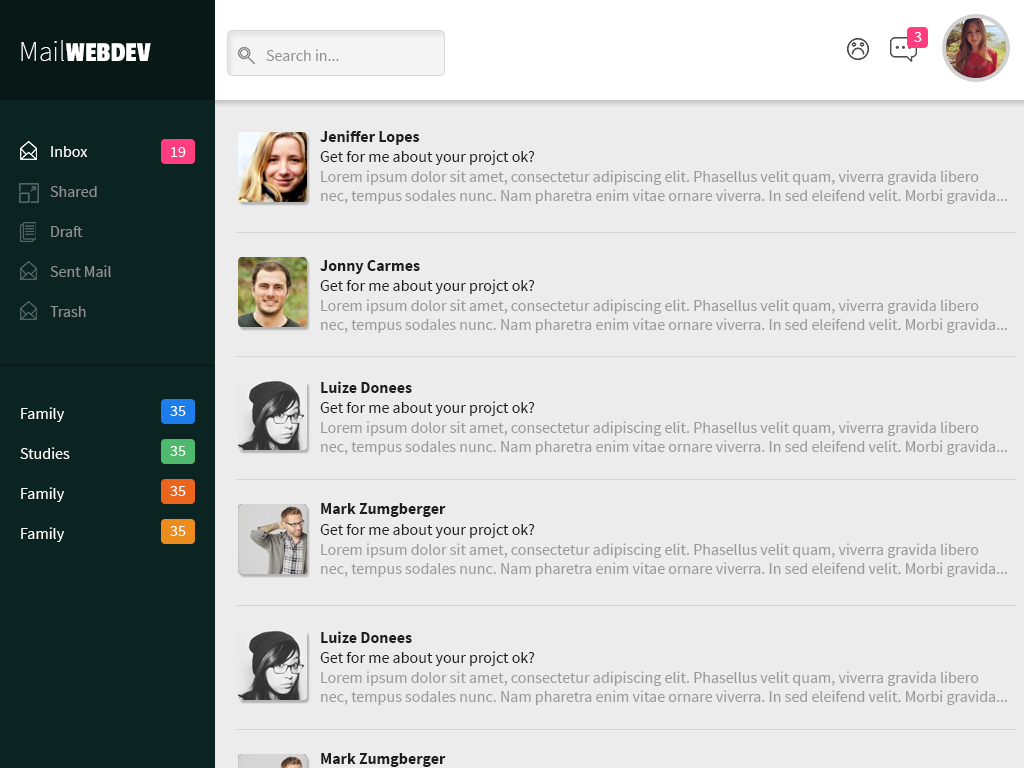
<style>
.page{position:relative;width:1024px;height:768px;background:#ececec}
.page>*{position:absolute;margin:0}
.t1{font:28.6px "PassionOne-Regular";color:#ffffff}
.t2{font:28.6px "SourceSansPro-ExtraLight";color:#ffffff}
.t3{font:16px "SourceSansPro-Regular";color:#ffffff}
.t4{font:16px "SourceSansPro-Regular";color:#919191}
.t5{font:16px "SourceSansPro-Bold";color:#1f1e1e}
.t6{font:16px "SourceSansPro-Regular";color:#1f1e1e}
.t7{font:16px "SourceSansPro-Regular";color:#9a9999}
.t8{font:16px "SourceSansPro-Regular";color:#8d9291}
</style>
<div class="page">
<p class="t1" style="left:21px;top:40px;width:130px;height:21px"><span class="t2">Mail</span>WEBDEV</p>
<p class="t3" style="left:914px;top:32px;width:8px;height:10px">3</p>
<p class="t4" style="left:266px;top:49px;width:73px;height:12px">Search in...</p>
<p class="t5" style="left:320px;top:130px;width:100px;height:15px">Jeniffer Lopes</p>
<p class="t3" style="left:51px;top:146px;width:37px;height:11px">Inbox</p>
<p class="t3" style="left:171px;top:147px;width:15px;height:10px">19</p>
<p class="t6" style="left:320px;top:150px;width:215px;height:15px">Get for me about your projct ok?</p>
<p class="t7" style="left:321px;top:170px;width:686px;height:34px">Lorem ipsum dolor sit amet, consectetur adipiscing elit. Phasellus velit quam, viverra gravida libero <br>nec, tempus sodales nunc. Nam pharetra enim vitae ornare viverra. In sed eleifend velit. Morbi gravida...</p>
<p class="t8" style="left:50px;top:186px;width:47px;height:11px">Shared</p>
<p class="t8" style="left:51px;top:226px;width:32px;height:11px">Draft</p>
<p class="t8" style="left:50px;top:265px;width:61px;height:12px">Sent Mail</p>
<p class="t5" style="left:320px;top:260px;width:100px;height:14px">Jonny Carmes</p>
<p class="t6" style="left:320px;top:279px;width:215px;height:15px">Get for me about your projct ok?</p>
<p class="t7" style="left:321px;top:299px;width:686px;height:34px">Lorem ipsum dolor sit amet, consectetur adipiscing elit. Phasellus velit quam, viverra gravida libero <br>nec, tempus sodales nunc. Nam pharetra enim vitae ornare viverra. In sed eleifend velit. Morbi gravida...</p>
<p class="t8" style="left:50px;top:306px;width:36px;height:11px">Trash</p>
<p class="t5" style="left:321px;top:381px;width:91px;height:12px">Luize Donees</p>
<p class="t6" style="left:320px;top:401px;width:215px;height:15px">Get for me about your projct ok?</p>
<p class="t3" style="left:21px;top:407px;width:43px;height:15px">Family</p>
<p class="t3" style="left:170px;top:406px;width:16px;height:10px">35</p>
<p class="t7" style="left:321px;top:421px;width:686px;height:34px">Lorem ipsum dolor sit amet, consectetur adipiscing elit. Phasellus velit quam, viverra gravida libero <br>nec, tempus sodales nunc. Nam pharetra enim vitae ornare viverra. In sed eleifend velit. Morbi gravida...</p>
<p class="t3" style="left:20px;top:447px;width:50px;height:12px">Studies</p>
<p class="t3" style="left:170px;top:446px;width:16px;height:10px">35</p>
<p class="t3" style="left:170px;top:486px;width:16px;height:10px">35</p>
<p class="t3" style="left:21px;top:487px;width:43px;height:15px">Family</p>
<p class="t5" style="left:321px;top:503px;width:125px;height:14px">Mark Zumgberger</p>
<p class="t3" style="left:21px;top:527px;width:43px;height:15px">Family</p>
<p class="t3" style="left:170px;top:526px;width:16px;height:10px">35</p>
<p class="t6" style="left:320px;top:523px;width:215px;height:15px">Get for me about your projct ok?</p>
<p class="t7" style="left:321px;top:543px;width:686px;height:34px">Lorem ipsum dolor sit amet, consectetur adipiscing elit. Phasellus velit quam, viverra gravida libero <br>nec, tempus sodales nunc. Nam pharetra enim vitae ornare viverra. In sed eleifend velit. Morbi gravida...</p>
<p class="t5" style="left:321px;top:631px;width:91px;height:12px">Luize Donees</p>
<p class="t6" style="left:320px;top:651px;width:215px;height:15px">Get for me about your projct ok?</p>
<p class="t7" style="left:321px;top:671px;width:686px;height:34px">Lorem ipsum dolor sit amet, consectetur adipiscing elit. Phasellus velit quam, viverra gravida libero <br>nec, tempus sodales nunc. Nam pharetra enim vitae ornare viverra. In sed eleifend velit. Morbi gravida...</p>
<p class="t5" style="left:321px;top:753px;width:125px;height:14px">Mark Zumgberger</p>
</div>
